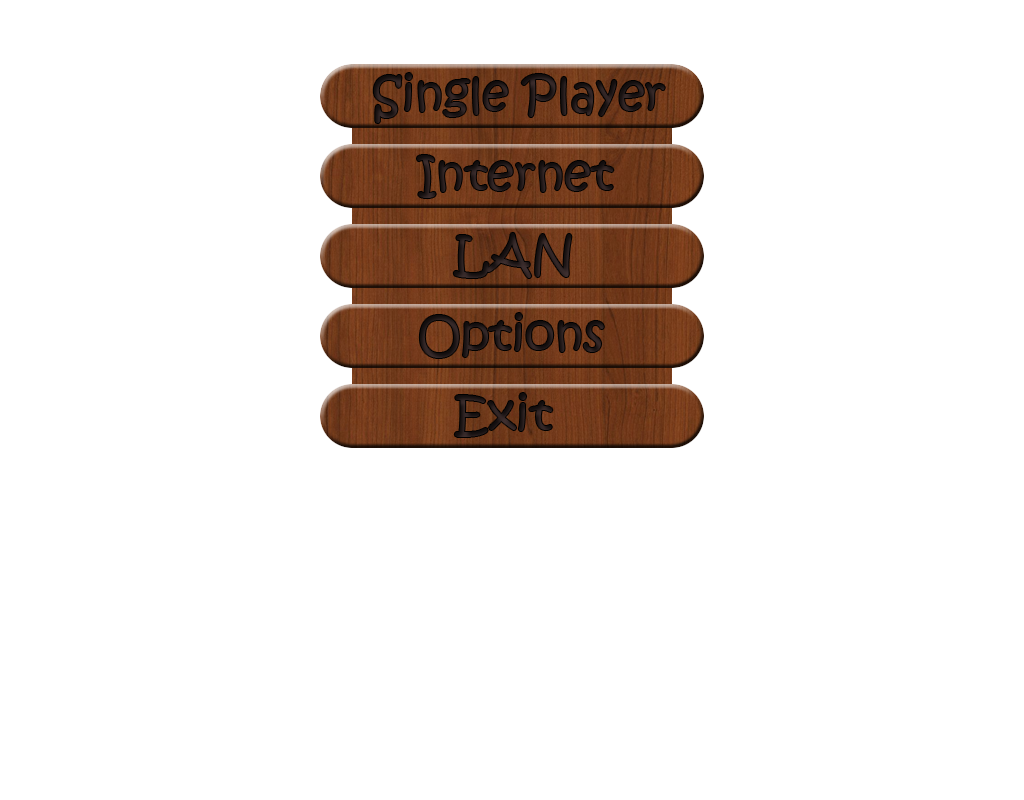
<style>
.page{position:relative;width:1024px;height:800px;background:#ffffff}
.page>*{position:absolute;margin:0}
.t1{font:48px "KristenITC-Regular";color:#211919}
.t2{font:48px "KristenITC-Regular";color:#221a1a}
.t3{font:48px "KristenITC-Regular";color:#261d1d}
</style>
<div class="page">
<p class="t1" style="left:373px;top:73px;width:292px;height:50px">Single Player</p>
<p class="t2" style="left:417px;top:155px;width:197px;height:43px">Internet</p>
<p class="t3" style="left:453px;top:233px;width:119px;height:45px">LAN</p>
<p class="t1" style="left:419px;top:313px;width:185px;height:45px">Options</p>
<p class="t1" style="left:454px;top:393px;width:99px;height:44px">Exit</p>
</div>
